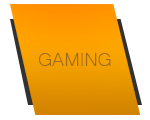
<style>
.page{position:relative;width:150px;height:120px;background:#ffffff}
.page>*{position:absolute;margin:0}
.t1{font:24px "Microsoft-Yi-Baiti";color:#9e6c1e}
</style>
<div class="page">
<p class="t1" style="left:39px;top:53px;width:72px;height:13px">GAMING</p>
</div>
